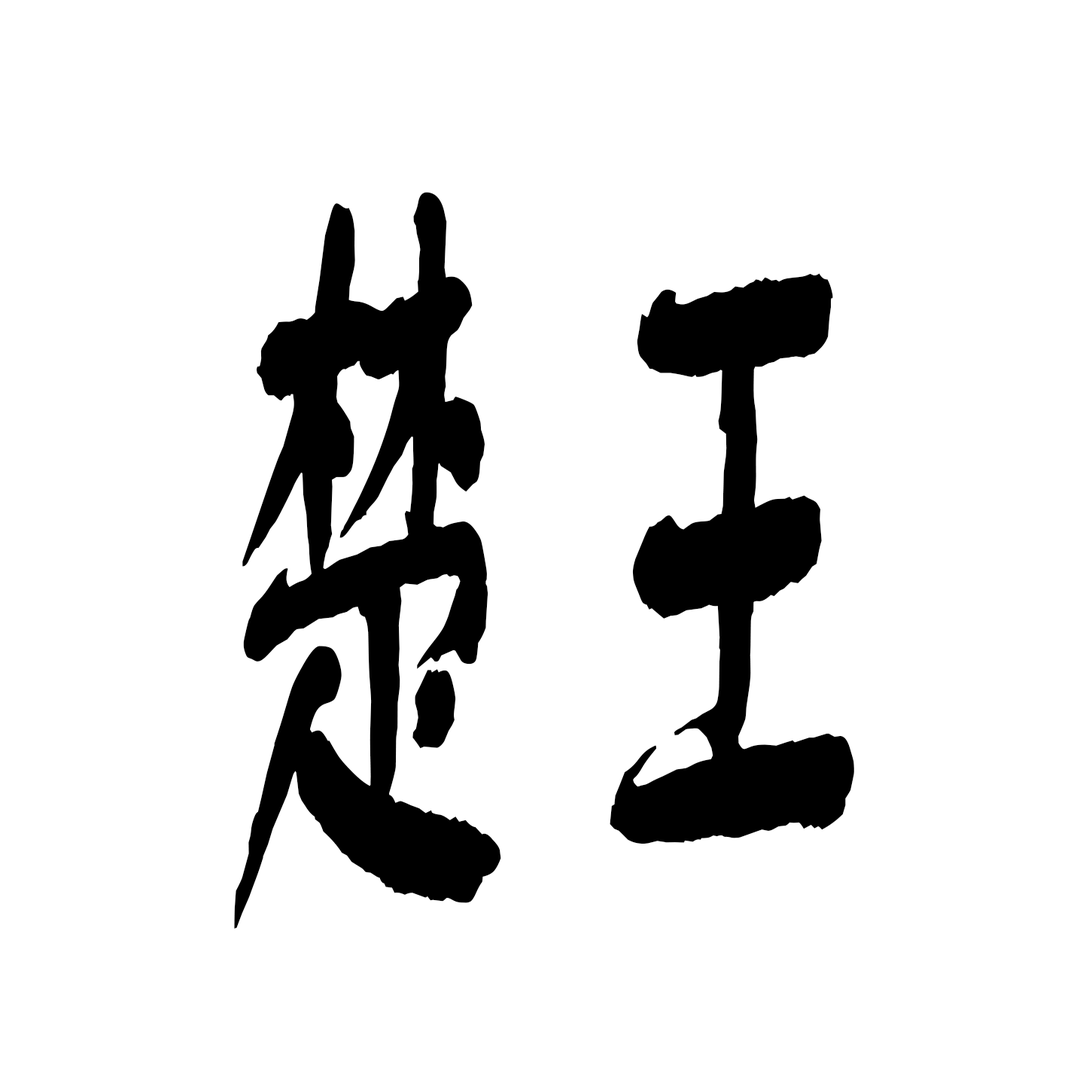
<style>
.page{position:relative;width:1092px;height:1092px;background:#ffffff}
.page>*{position:absolute;margin:0}
.t1{font:804.8px "HYn1gf";color:#000000;scale:0.45 1}
</style>
<div class="page">
<p class="t1" style="left:234px;top:192px;width:620px;height:737px">楚王</p>
</div>
